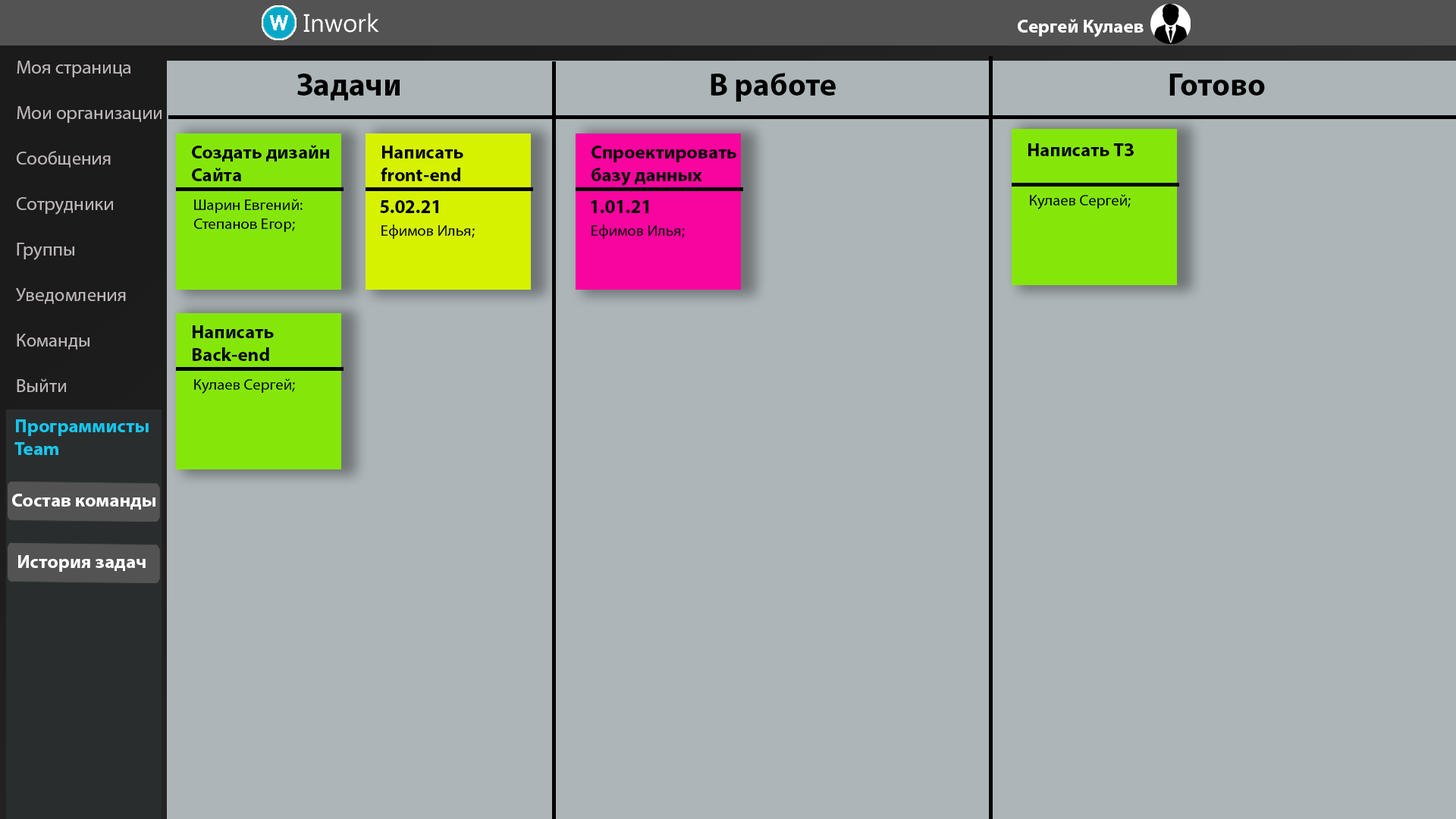
<style>
.page{position:relative;width:1456px;height:819px;background:#acb5b8}
.page>*{position:absolute;margin:0}
.t1{font:19px "MyriadPro-Bold";color:#ffffff}
.t2{font:19px "MyriadPro-Regular";color:#bdb7b7}
.t3{font:31.6px "MyriadPro-Bold";color:#000000}
.t4{font:19px "MyriadPro-Bold";color:#000000}
.t5{font:15.8px "MyriadPro-Regular";color:#000000}
.t6{font:19px "MyriadPro-Bold";color:#16c6ec}
</style>
<div class="page">
<p class="t1" style="left:1018px;top:19px;width:126px;height:18px">Сергей Кулаев</p>
<p class="t2" style="left:16px;top:61px;width:146px;height:331px">Моя страница<br><br>Мои организации<br><br>Сообщения<br><br>Сотрудники<br><br>Группы<br><br>Уведомления<br><br>Команды<br><br>Выйти</p>
<p class="t3" style="left:297px;top:74px;width:103px;height:27px">Задачи</p>
<p class="t3" style="left:711px;top:73px;width:125px;height:29px">В работе</p>
<p class="t3" style="left:1169px;top:74px;width:96px;height:22px">Готово</p>
<p class="t4" style="left:192px;top:145px;width:137px;height:36px">Создать дизайн<br>Сайта</p>
<p class="t4" style="left:381px;top:146px;width:82px;height:35px">Написать <br>front-end</p>
<p class="t4" style="left:591px;top:146px;width:145px;height:40px">Спроектировать <br>базу данных</p>
<p class="t4" style="left:1028px;top:143px;width:106px;height:13px">Написать ТЗ</p>
<p class="t5" style="left:1030px;top:194px;width:101px;height:15px">Кулаев Сергей;</p>
<p class="t5" style="left:193px;top:199px;width:110px;height:33px">Шарин Евгений:<br>Степанов Егор;</p>
<p class="t4" style="left:380px;top:200px;width:58px;height:13px">5.02.21</p>
<p class="t4" style="left:591px;top:200px;width:57px;height:13px">1.01.21</p>
<p class="t5" style="left:381px;top:224px;width:94px;height:15px">Ефимов Илья;</p>
<p class="t5" style="left:591px;top:224px;width:94px;height:15px">Ефимов Илья;</p>
<p class="t4" style="left:193px;top:325px;width:81px;height:36px">Написать <br>Back-end</p>
<p class="t5" style="left:194px;top:378px;width:101px;height:16px">Кулаев Сергей;</p>
<p class="t6" style="left:14px;top:419px;width:135px;height:36px">Программисты<br>Team</p>
<p class="t1" style="left:12px;top:494px;width:143px;height:16px">Состав команды</p>
<p class="t1" style="left:18px;top:555px;width:128px;height:17px">История задач</p>
</div>
